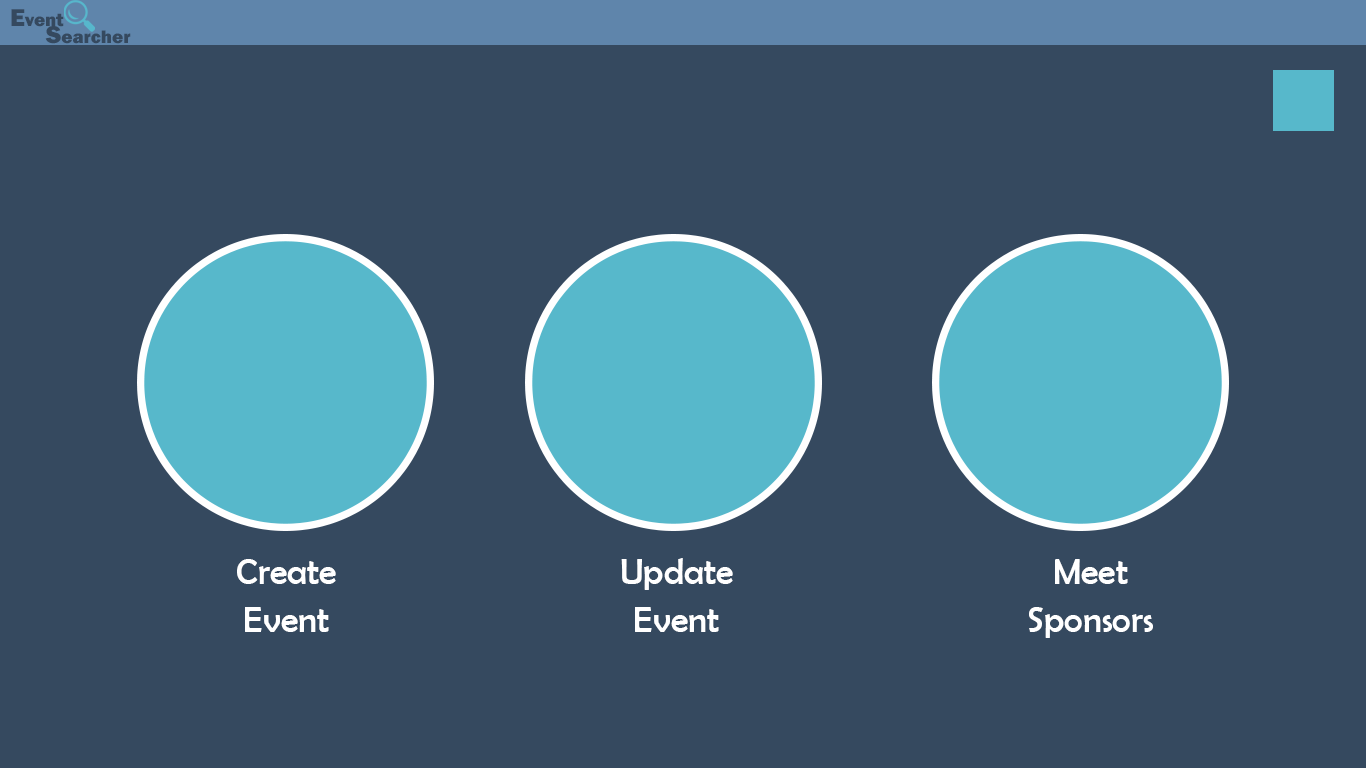
<style>
.page{position:relative;width:1366px;height:768px;background:#35495f}
.page>*{position:absolute;margin:0}
.t1{font:18.8px "FranklinGothic-Heavy";color:#35495f}
.t2{font:25.1px "FranklinGothic-Heavy";color:#35495f}
.t3{font:36px/48px "BerlinSansFB-Reg";color:#ffffff}
</style>
<div class="page">
<p class="t1" style="left:11px;top:9px;width:53px;height:18px"><span class="t2">E</span>vent</p>
<p class="t1" style="left:45px;top:26px;width:86px;height:18px"><span class="t2">S</span>earcher</p>
<p class="t3" style="left:621px;top:558px;width:112px;height:74px;text-align:center">Update<br>Event</p>
<p class="t3" style="left:237px;top:559px;width:99px;height:73px;text-align:center">Create <br>Event</p>
<p class="t3" style="left:1029px;top:559px;width:124px;height:79px;text-align:center">Meet<br>Sponsors</p>
</div>
